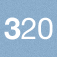
<style>
.page{position:relative;width:57px;height:57px}
.page>*{position:absolute;margin:0}
.t1{font:30px "HelveticaNeue";letter-spacing:-0.005em;color:#ffffff}
.t2{font:30px "HelveticaNeue-Bold";letter-spacing:-0.005em;color:#ffffff}
</style>
<div class="page">
<p class="t1" style="left:4px;top:17px;width:49px;height:23px"><span class="t2">3</span>20</p>
</div>
